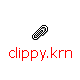
<style>
.page{position:relative;width:80px;height:80px;background:#ffffff}
.page>*{position:absolute;margin:0}
.t1{font:14px "MSReferenceSansSerif";color:#ff0100}
</style>
<div class="page">
<p class="t1" style="left:9px;top:47px;width:63px;height:14px">clippy.krn</p>
</div>
